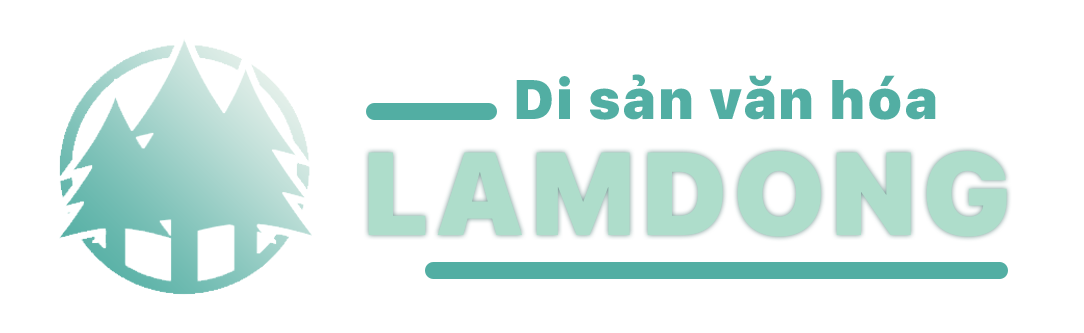
<style>
.page{position:relative;width:1084px;height:333px;background:#ffffff}
.page>*{position:absolute;margin:0}
.t1{font:55.2px "SFProDisplay-Black";letter-spacing:0.06em;color:#52aea3}
</style>
<div class="page">
<p class="t1" style="left:516px;top:74px;width:420px;height:46px">Di sản văn hóa</p>
</div>
